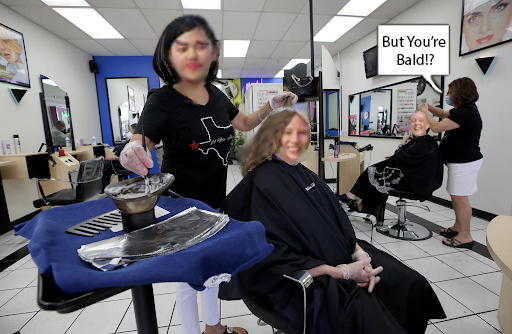
<style>
.page{position:relative;width:512px;height:334px}
.page>*{position:absolute;margin:0}
.t1{font:15.5px "MyriadPro-Regular";color:#000000}
</style>
<div class="page">
<p class="t1" style="left:383px;top:36px;width:63px;height:29px;text-align:center">But You’re <br>Bald!?</p>
</div>
